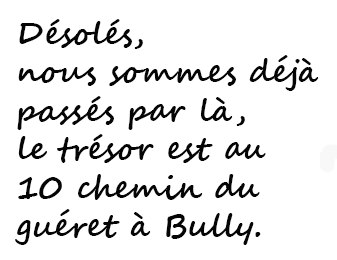
<style>
.page{position:relative;width:337px;height:260px;background:#ffffff}
.page>*{position:absolute;margin:0}
.t1{font:32px "SegoeScript-Bold";color:#050505}
</style>
<div class="page">
<p class="t1" style="left:15px;top:19px;width:304px;height:226px">Désolés, <br>nous sommes déjà <br>passés par là, <br>le trésor est au <br>10 chemin du <br>guéret à Bully.</p>
</div>
